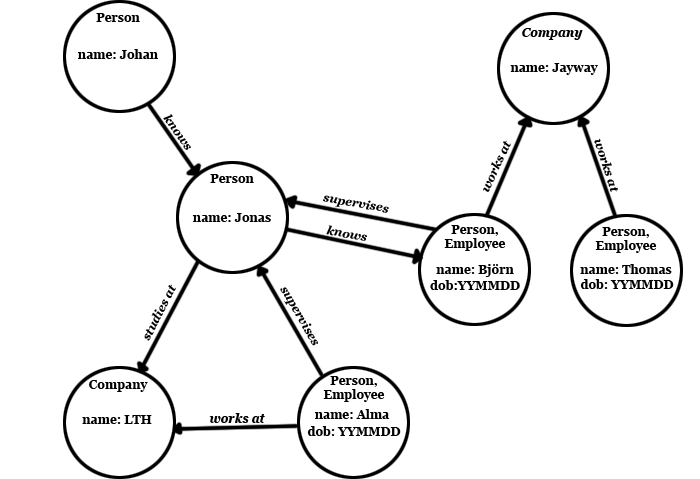
<style>
.page{position:relative;width:700px;height:479px;background:#ffffff}
.page>*{position:absolute;margin:0}
.t1{font:12px "Georgia-Bold";color:#000000}
.t2{font:12px "Georgia-BoldItalic";color:#000000}
</style>
<div class="page">
<p class="t1" style="left:96px;top:13px;width:44px;height:9px">Person</p>
<p class="t2" style="left:522px;top:28px;width:61px;height:12px">Company</p>
<p class="t1" style="left:77px;top:49px;width:81px;height:10px">name: Johan</p>
<p class="t1" style="left:510px;top:63px;width:88px;height:12px">name: Jayway</p>
<p class="t2" style="left:163px;top:114px;width:28px;height:36px;rotate:55deg">knows</p>
<p class="t2" style="left:483px;top:140px;width:28px;height:52px;rotate:-65deg">works at</p>
<p class="t2" style="left:594px;top:138px;width:24px;height:54px;rotate:72deg">works at</p>
<p class="t1" style="left:210px;top:174px;width:44px;height:9px">Person</p>
<p class="t2" style="left:323px;top:195px;width:66px;height:18px;rotate:10deg">supervises</p>
<p class="t1" style="left:192px;top:213px;width:79px;height:9px">name: Jonas</p>
<p class="t2" style="left:326px;top:225px;width:41px;height:16px;rotate:11deg">knows</p>
<p class="t1" style="left:444px;top:225px;width:62px;height:26px;text-align:center">Person,<br>Employee</p>
<p class="t1" style="left:595px;top:227px;width:62px;height:26px;text-align:center">Person,<br>Employee</p>
<p class="t1" style="left:436px;top:264px;width:78px;height:13px">name: Björn</p>
<p class="t1" style="left:580px;top:264px;width:92px;height:10px">name: Thomas</p>
<p class="t1" style="left:430px;top:280px;width:90px;height:10px">dob:YYMMDD</p>
<p class="t1" style="left:580px;top:279px;width:94px;height:10px">dob: YYMMDD</p>
<p class="t2" style="left:144px;top:284px;width:32px;height:57px;rotate:-63deg">studies at</p>
<p class="t2" style="left:280px;top:287px;width:38px;height:59px;rotate:60deg">supervises</p>
<p class="t1" style="left:323px;top:376px;width:62px;height:26px;text-align:center">Person,<br>Employee</p>
<p class="t1" style="left:89px;top:380px;width:59px;height:12px">Company</p>
<p class="t2" style="left:209px;top:413px;width:56px;height:10px">works at</p>
<p class="t1" style="left:314px;top:409px;width:76px;height:10px">name: Alma</p>
<p class="t1" style="left:82px;top:415px;width:70px;height:9px">name: LTH</p>
<p class="t1" style="left:307px;top:426px;width:94px;height:10px">dob: YYMMDD</p>
</div>
